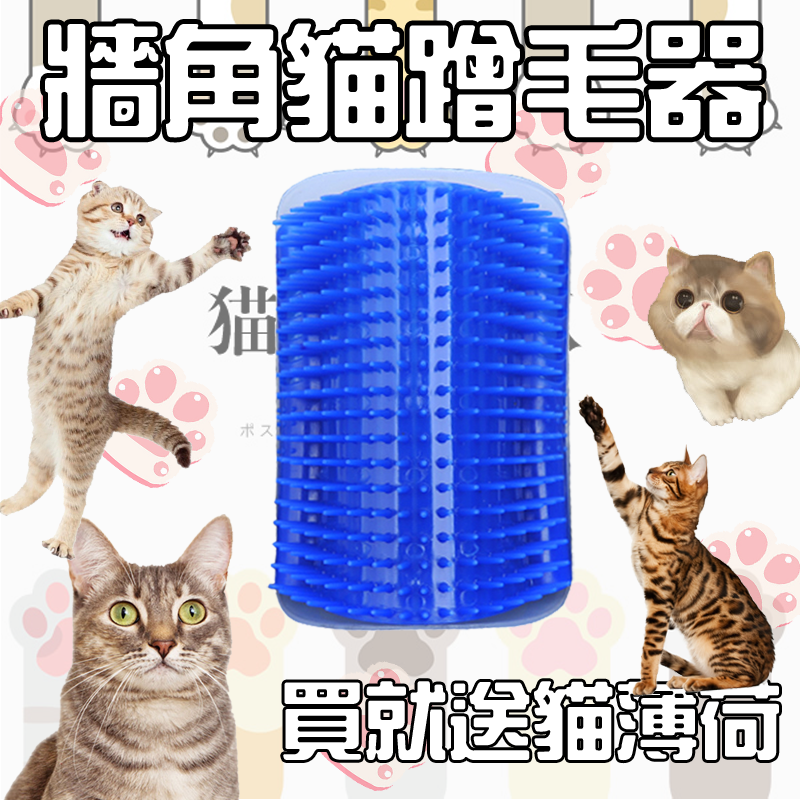
<style>
.page{position:relative;width:800px;height:800px;background:#fbfbfb}
.page>*{position:absolute;margin:0}
.t1{font:120.6px "HanWangZonYi";color:#ffffff}
.t2{font:83.6px "HanWangZonYi";color:#ffffff}
</style>
<div class="page">
<p class="t1" style="left:44px;top:23px;width:718px;height:115px">牆角貓蹭毛器</p>
<p class="t2" style="left:283px;top:681px;width:496px;height:80px">買就送貓薄荷</p>
</div>
